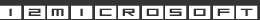
<style>
.page{position:relative;width:260px;height:20px;background:#ffffff}
.page>*{position:absolute;margin:0}
.t1{font:23.7px "Inversionz";color:#ffffff;scale:1.6 1}
</style>
<div class="page">
<p class="t1" style="left:0px;top:5px;width:258px;height:14px">12microsoft</p>
</div>
